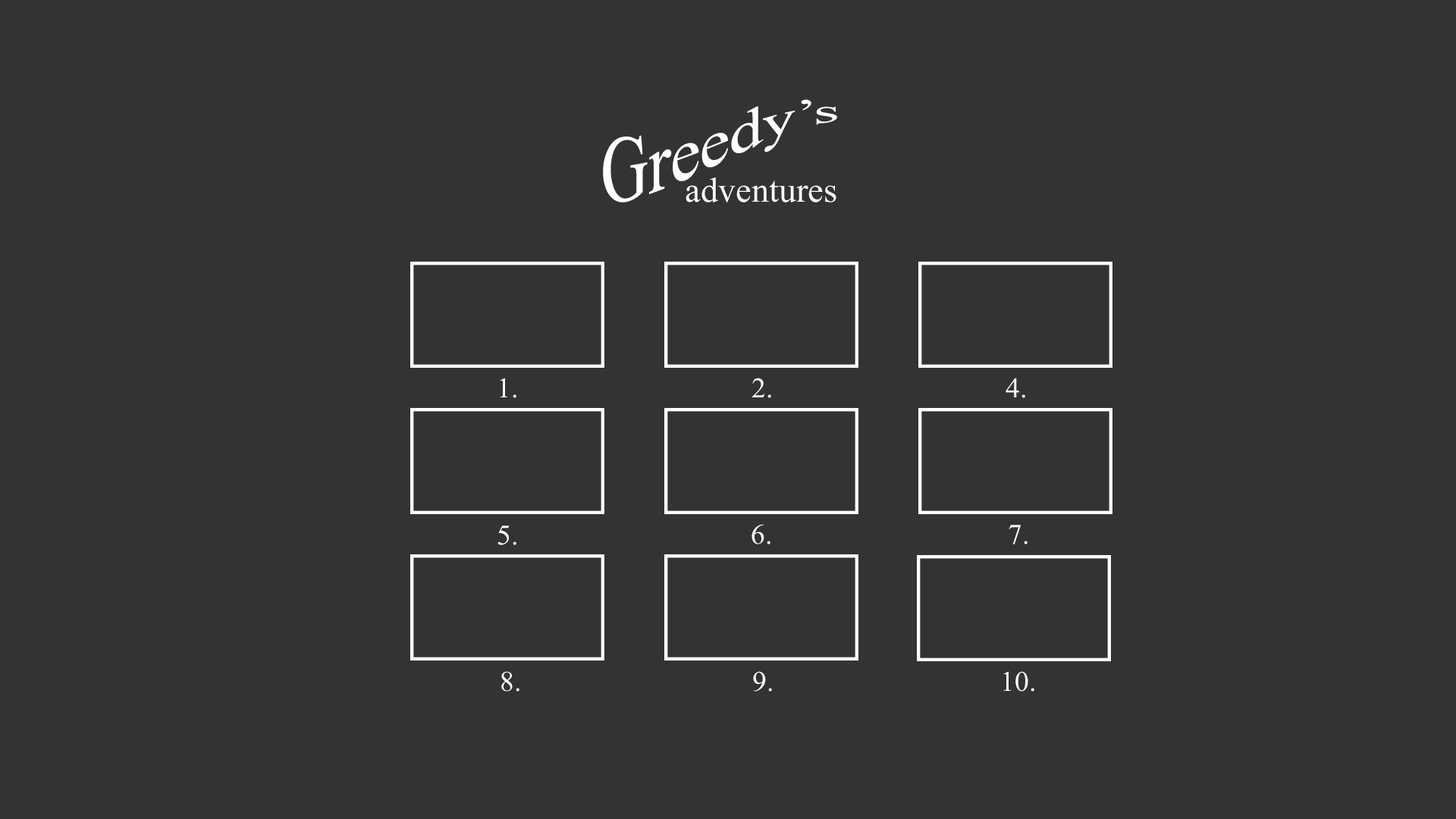
<style>
.page{position:relative;width:1456px;height:819px;background:#333333}
.page>*{position:absolute;margin:0}
.t1{font:98.6px "MicrosoftHimalaya";color:#fffefe}
.t2{font:52.3px "MicrosoftHimalaya";color:#fffefe}
.t3{font:42.5px "MicrosoftHimalaya";color:#fffefe}
</style>
<div class="page">
<p class="t1" style="left:603px;top:99px;width:234px;height:103px">Greedy’s</p>
<p class="t2" style="left:686px;top:177px;width:150px;height:25px">adventures</p>
<p class="t3" style="left:500px;top:378px;width:16px;height:20px">1.</p>
<p class="t3" style="left:751px;top:378px;width:20px;height:20px">2.</p>
<p class="t3" style="left:1006px;top:378px;width:19px;height:20px">4.</p>
<p class="t3" style="left:497px;top:526px;width:19px;height:19px">5.</p>
<p class="t3" style="left:751px;top:524px;width:19px;height:20px">6.</p>
<p class="t3" style="left:1009px;top:525px;width:19px;height:19px">7.</p>
<p class="t3" style="left:501px;top:671px;width:18px;height:21px">8.</p>
<p class="t3" style="left:753px;top:671px;width:19px;height:21px">9.</p>
<p class="t3" style="left:1003px;top:671px;width:31px;height:21px">10.</p>
</div>
